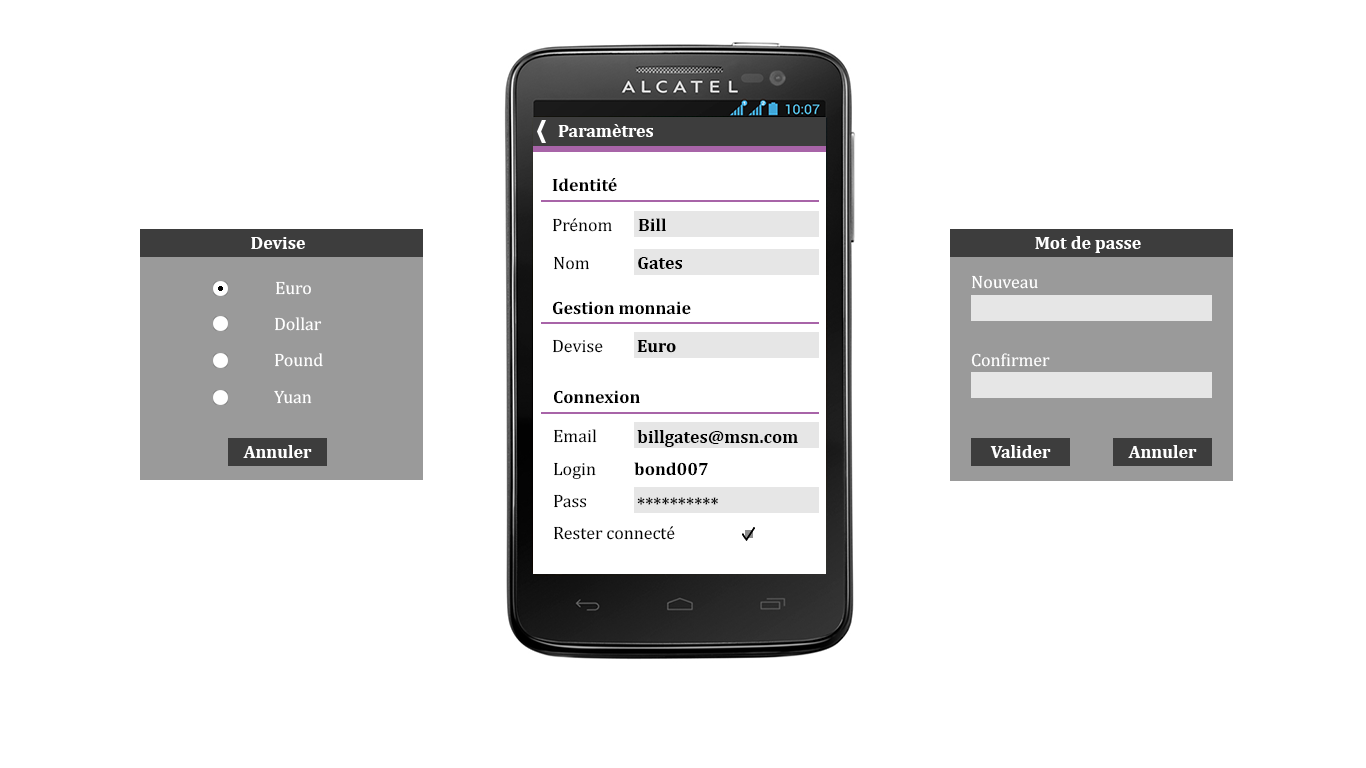
<style>
.page{position:relative;width:1366px;height:768px;background:#ffffff}
.page>*{position:absolute;margin:0}
.t1{font:18px "Cambria-Bold";color:#ffffff}
.t2{font:18px "Cambria-Bold";color:#000000}
.t3{font:18px "Cambria";color:#000000}
.t4{font:18px "Cambria";color:#ffffff}
</style>
<div class="page">
<p class="t1" style="left:558px;top:124px;width:95px;height:13px">Paramètres</p>
<p class="t2" style="left:552px;top:178px;width:65px;height:14px">Identité</p>
<p class="t3" style="left:553px;top:218px;width:59px;height:14px">Prénom</p>
<p class="t2" style="left:638px;top:218px;width:28px;height:13px">Bill</p>
<p class="t1" style="left:251px;top:237px;width:54px;height:12px">Devise</p>
<p class="t1" style="left:1035px;top:236px;width:106px;height:17px">Mot de passe</p>
<p class="t3" style="left:554px;top:256px;width:35px;height:14px">Nom</p>
<p class="t2" style="left:638px;top:257px;width:44px;height:12px">Gates</p>
<p class="t4" style="left:276px;top:281px;width:35px;height:14px">Euro</p>
<p class="t4" style="left:972px;top:275px;width:66px;height:14px">Nouveau</p>
<p class="t2" style="left:553px;top:301px;width:138px;height:14px">Gestion monnaie</p>
<p class="t4" style="left:275px;top:317px;width:47px;height:14px">Dollar</p>
<p class="t3" style="left:553px;top:339px;width:50px;height:14px">Devise</p>
<p class="t4" style="left:275px;top:353px;width:48px;height:14px">Pound</p>
<p class="t4" style="left:971px;top:353px;width:79px;height:14px">Confirmer</p>
<p class="t4" style="left:274px;top:390px;width:38px;height:14px">Yuan</p>
<p class="t2" style="left:554px;top:390px;width:86px;height:14px">Connexion</p>
<p class="t3" style="left:554px;top:429px;width:43px;height:14px">Email</p>
<p class="t2" style="left:637px;top:430px;width:161px;height:17px">billgates@msn.com</p>
<p class="t1" style="left:243px;top:445px;width:69px;height:13px">Annuler</p>
<p class="t1" style="left:990px;top:445px;width:61px;height:13px">Valider</p>
<p class="t1" style="left:1128px;top:445px;width:69px;height:13px">Annuler</p>
<p class="t3" style="left:554px;top:462px;width:42px;height:18px">Login</p>
<p class="t2" style="left:634px;top:462px;width:74px;height:14px">bond007</p>
<p class="t3" style="left:554px;top:494px;width:33px;height:14px">Pass</p>
<p class="t2" style="left:637px;top:497px;width:81px;height:8px">**********</p>
<p class="t3" style="left:554px;top:526px;width:121px;height:14px">Rester connecté</p>
</div>
